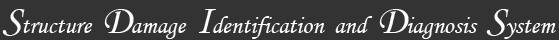
<style>
.page{position:relative;width:559px;height:40px;background:#333333}
.page>*{position:absolute;margin:0}
.t1{font:25px "MonotypeCorsiva";letter-spacing:-0.005em;color:#ffffff}
.t2{font:41.7px "MonotypeCorsiva";letter-spacing:-0.005em;color:#ffffff}
</style>
<div class="page">
<p class="t1" style="left:2px;top:9px;width:554px;height:30px"><span class="t2">S</span>tructure <span class="t2">D</span>amage <span class="t2">I</span>dentification and <span class="t2">D</span>iagnosis <span class="t2">S</span>ystem</p>
</div>
